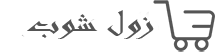
<style>
.page{position:relative;width:215px;height:52px;background:#ffffff}
.page>*{position:absolute;margin:0}
.t1{font:34.1px "Andalus";color:#555555;scale:1.32 1}
</style>
<div class="page">
<p class="t1" style="left:27px;top:10px;width:127px;height:29px">زول شوب</p>
</div>
